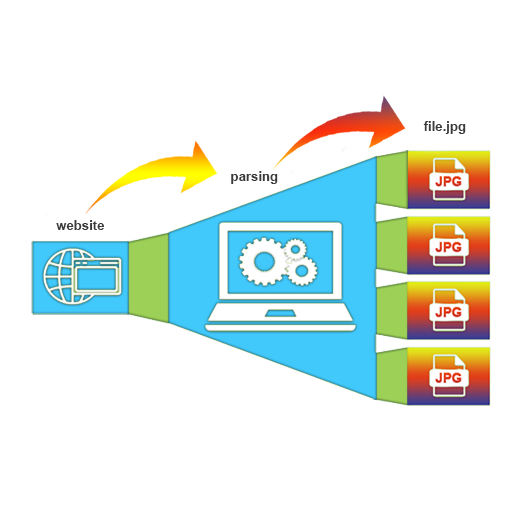
<style>
.page{position:relative;width:512px;height:512px;background:#ffffff}
.page>*{position:absolute;margin:0}
.t1{font:13.1px "Arial-BoldMT";color:#3a3a3a}
</style>
<div class="page">
<p class="t1" style="left:423px;top:121px;width:43px;height:13px">file.jpg</p>
<p class="t1" style="left:231px;top:171px;width:47px;height:13px">parsing</p>
<p class="t1" style="left:56px;top:220px;width:49px;height:10px">website</p>
</div>
